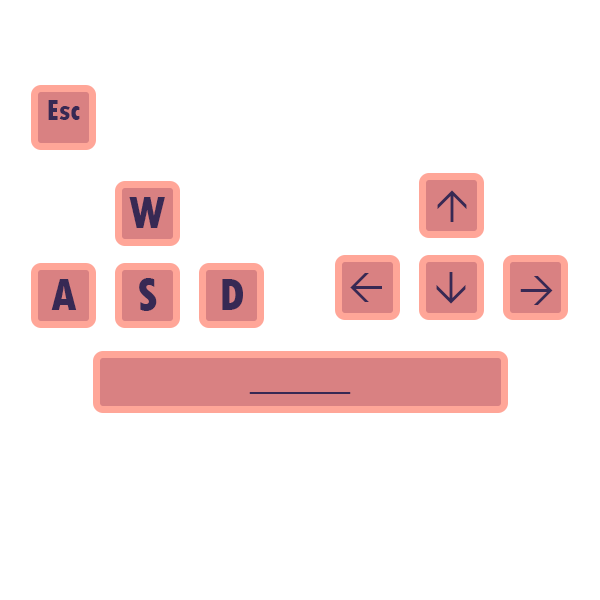
<style>
.page{position:relative;width:600px;height:600px;background:#ffffff}
.page>*{position:absolute;margin:0}
.t1{font:30px "TwCenMT-CondensedExtraBold";color:#372954}
.t2{font:48px "TwCenMT-CondensedExtraBold";color:#372954}
.t3{font:40px "TwCenMT-CondensedExtraBold";color:#372954}
</style>
<div class="page">
<p class="t1" style="left:48px;top:100px;width:32px;height:20px">Esc</p>
<p class="t2" style="left:129px;top:197px;width:36px;height:31px">W</p>
<p class="t2" style="left:51px;top:279px;width:26px;height:31px">A</p>
<p class="t2" style="left:139px;top:278px;width:18px;height:33px">S</p>
<p class="t2" style="left:222px;top:279px;width:21px;height:31px">D</p>
<p class="t3" style="left:249px;top:392px;width:102px;height:2px">_____</p>
</div>
